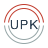
<style>
.page{position:relative;width:48px;height:48px;background:#ffffff}
.page>*{position:absolute;margin:0}
.t1{font:12px "HelveticaNeueLTPro-Th";letter-spacing:0.15em;color:#2c3e50;text-transform:uppercase;font-weight:bold}
</style>
<div class="page">
<p class="t1" style="left:10px;top:20px;width:28px;height:10px">UPK</p>
</div>
